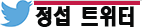
<style>
.page{position:relative;width:143px;height:27px;background:#ffffff}
.page>*{position:absolute;margin:0}
.t1{font:21.1px "HeadlineR-HM";color:#090a0a;scale:0.87 1}
</style>
<div class="page">
<p class="t1" style="left:35px;top:6px;width:99px;height:21px">정섭 트위터</p>
</div>
